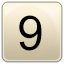
<style>
.page{position:relative;width:64px;height:64px}
.page>*{position:absolute;margin:0}
.t1{font:48px "ArialMT";color:#000000}
</style>
<div class="page">
<p class="t1" style="left:19px;top:15px;width:23px;height:36px">9</p>
</div>
